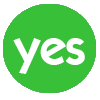
<style>
.page{position:relative;width:100px;height:100px;background:#38c138}
.page>*{position:absolute;margin:0}
.t1{font:48px "ELEGANCE";color:#ffffff}
</style>
<div class="page">
<p class="t1" style="left:13px;top:38px;width:72px;height:36px">yes</p>
</div>
